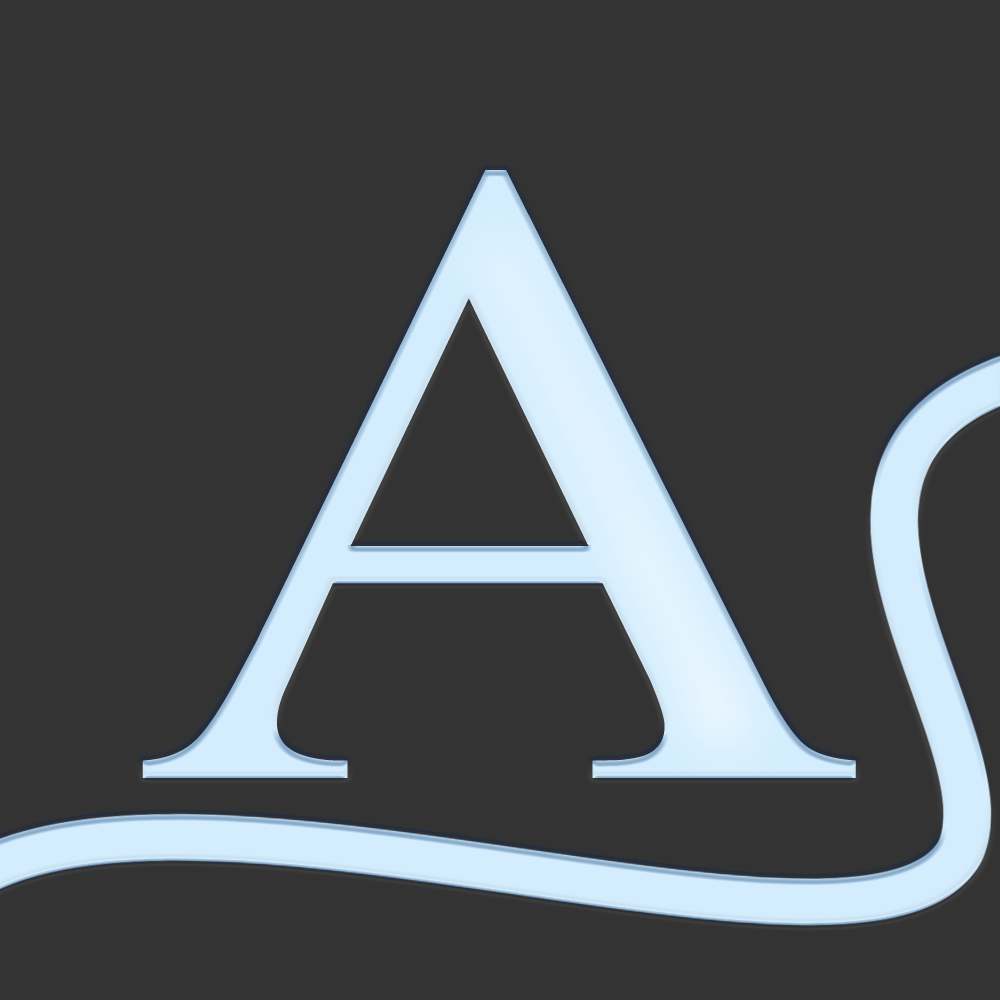
<style>
.page{position:relative;width:1000px;height:1000px;background:#333333}
.page>*{position:absolute;margin:0}
.t1{font:901.6px "UTM-Times";letter-spacing:0.02em;color:#d5eefe;scale:1.14 1}
</style>
<div class="page">
<p class="t1" style="left:142px;top:170px;width:714px;height:608px">A</p>
</div>
